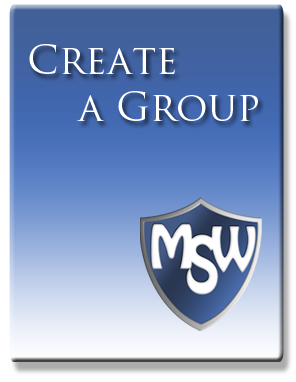
<style>
.page{position:relative;width:296px;height:382px}
.page>*{position:absolute;margin:0}
.t1{font:39.4px "TrajanPro-Regular";color:#ffffff;font-variant:small-caps}
</style>
<div class="page">
<p class="t1" style="left:29px;top:44px;width:229px;height:77px">Create <br>    a Group</p>
</div>
